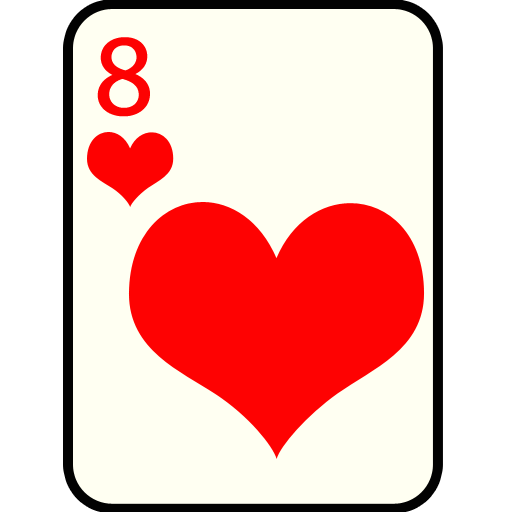
<style>
.page{position:relative;width:512px;height:512px;background:#fffff2}
.page>*{position:absolute;margin:0}
.t1{font:200px "MyriadPro-Regular";letter-spacing:-0.05em;color:#fd0202;font-variant:small-caps;font-weight:bold}
</style>
<div class="page">
<p class="t1" style="left:97px;top:37px;width:53px;height:80px">8</p>
</div>
